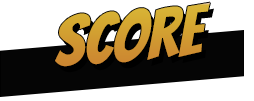
<style>
.page{position:relative;width:254px;height:101px;background:#ffffff}
.page>*{position:absolute;margin:0}
.t1{font:70.3px "Bangers-Regular";color:#d29e31}
</style>
<div class="page">
<p class="t1" style="left:55px;top:2px;width:155px;height:65px;rotate:-5deg">score</p>
</div>
